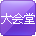
<style>
.page{position:relative;width:36px;height:36px}
.page>*{position:absolute;margin:0}
.t1{font:12px "LiGothicMed";letter-spacing:-0.02em;color:#fefefe}
.t2{font:12px "MicrosoftJhengHeiRegular";letter-spacing:-0.02em;color:#fefefe}
</style>
<div class="page">
<p class="t1" style="left:1px;top:13px;width:34px;height:11px">大<span class="t2">会</span>堂</p>
</div>
